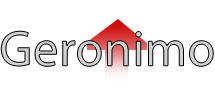
<style>
.page{position:relative;width:215px;height:100px;background:#ffffff}
.page>*{position:absolute;margin:0}
.t1{font:50.8px "Titillium-Semibold";letter-spacing:0.01em;color:#d1d1d1}
</style>
<div class="page">
<p class="t1" style="left:1px;top:31px;width:213px;height:36px">Geronimo</p>
</div>
